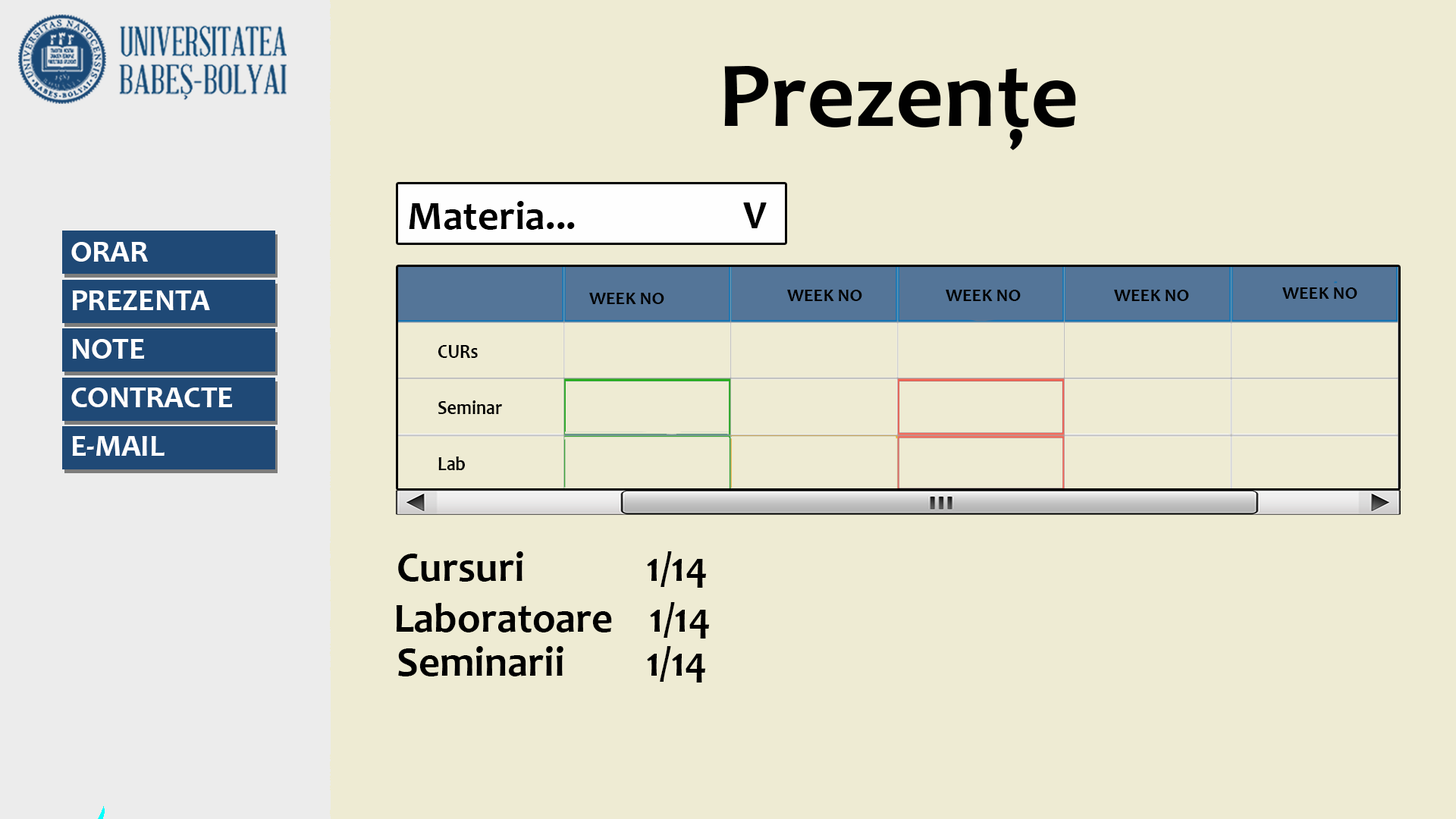
<style>
.page{position:relative;width:1456px;height:819px;background:#eeebd3}
.page>*{position:absolute;margin:0}
.t1{font:94.3px "Candara-Bold";color:#000000}
.t2{font:41.1px "Candara-Bold";color:#000000}
.t3{font:30px/48.4px "Candara-Bold";color:#ffffff;scale:1.03 1}
.t4{font:18.2px "Candara-Bold";color:#000000}
.t5{font:19.9px/55.9px "Candara-Bold";color:#000000;scale:0.91 1}
.t6{font:41.6px "Candara-Bold";color:#000000}
</style>
<div class="page">
<p class="t1" style="left:724px;top:66px;width:352px;height:84px">Prezențe</p>
<p class="t2" style="left:409px;top:201px;width:166px;height:29px">Materia...</p>
<p class="t2" style="left:743px;top:202px;width:24px;height:26px">V</p>
<p class="t3" style="left:71px;top:242px;width:162px;height:214px">ORAR<br>PREZENTA<br>NOTE<br>CONTRACTE<br>E-MAIL</p>
<p class="t4" style="left:589px;top:293px;width:75px;height:11px">WEEK NO</p>
<p class="t4" style="left:787px;top:290px;width:75px;height:11px">WEEK NO</p>
<p class="t4" style="left:946px;top:290px;width:75px;height:11px">WEEK NO</p>
<p class="t4" style="left:1114px;top:290px;width:75px;height:11px">WEEK NO</p>
<p class="t4" style="left:1282px;top:287px;width:75px;height:12px">WEEK NO</p>
<p class="t5" style="left:438px;top:345px;width:64px;height:125px">CURs<br>Seminar<br>Lab</p>
<p class="t6" style="left:398px;top:551px;width:309px;height:37px">Cursuri  1/14</p>
<p class="t6" style="left:396px;top:602px;width:314px;height:37px">Laboratoare    1/14</p>
<p class="t6" style="left:398px;top:646px;width:308px;height:36px">Seminarii         1/14</p>
</div>
